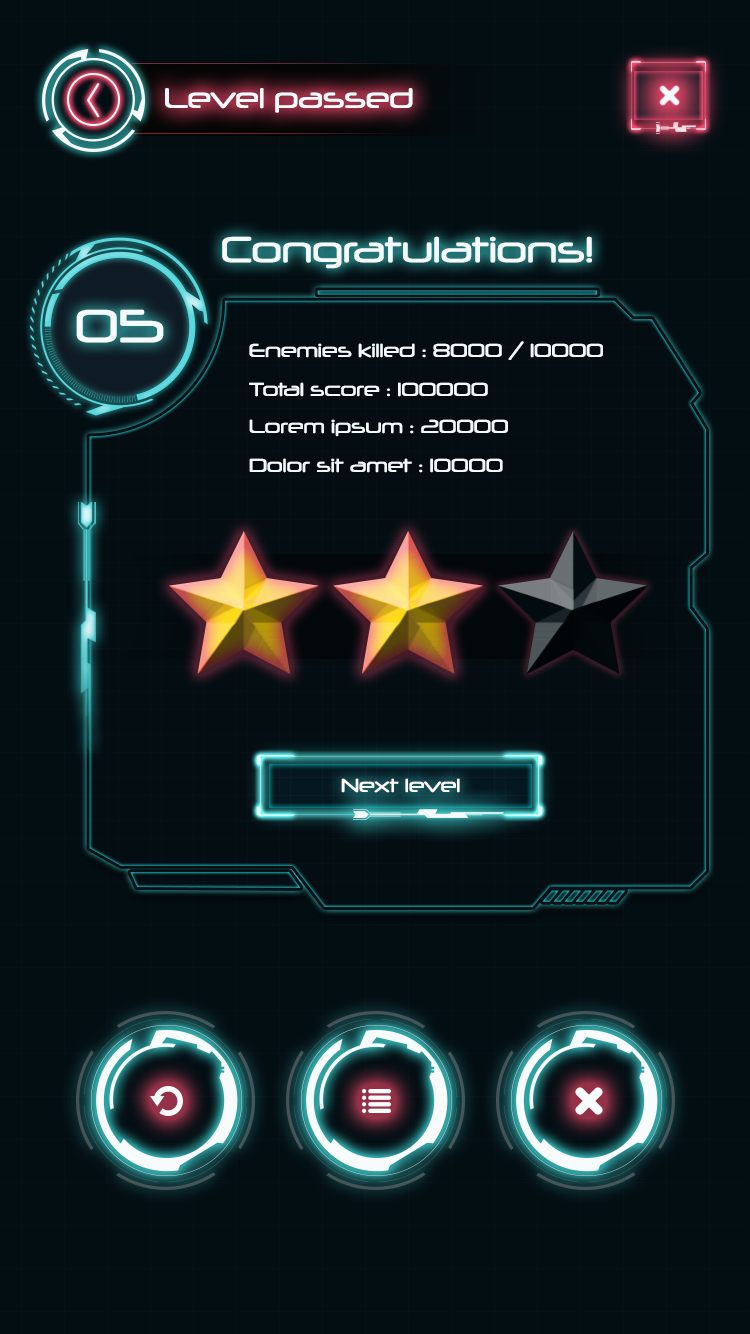
<style>
.page{position:relative;width:750px;height:1334px;background:#030e13}
.page>*{position:absolute;margin:0}
.t1{font:27.2px "Neuropol-Regular";color:#f4fafc}
.t2{font:35px "Neuropol-Regular";color:#f4fafc}
.t3{font:45.1px "Neuropol-Regular";color:#f4fafc}
.t4{font:18.1px "Neuropol-Regular";color:#f4fafc}
.t5{font:18.1px "Neuropol-Regular";color:#ffffff}
</style>
<div class="page">
<p class="t1" style="left:165px;top:88px;width:248px;height:25px">Level passed</p>
<p class="t2" style="left:222px;top:236px;width:370px;height:33px">Congratulations!</p>
<p class="t3" style="left:76px;top:309px;width:88px;height:34px">05</p>
<p class="t4" style="left:249px;top:341px;width:354px;height:19px">Enemies killed : 8000 / 10000</p>
<p class="t4" style="left:249px;top:382px;width:239px;height:15px">Total score : 100000</p>
<p class="t4" style="left:249px;top:419px;width:259px;height:18px">Lorem ipsum : 20000</p>
<p class="t4" style="left:249px;top:458px;width:254px;height:15px">Dolor sit amet : 10000</p>
<p class="t5" style="left:341px;top:778px;width:119px;height:15px">Next level</p>
</div>
